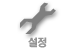
<style>
.page{position:relative;width:75px;height:50px;background:#ffffff}
.page>*{position:absolute;margin:0}
.t1{font:10px "H2hdrM";letter-spacing:-0.075em;color:#959595}
</style>
<div class="page">
<p class="t1" style="left:28px;top:37px;width:19px;height:11px">설정</p>
</div>
